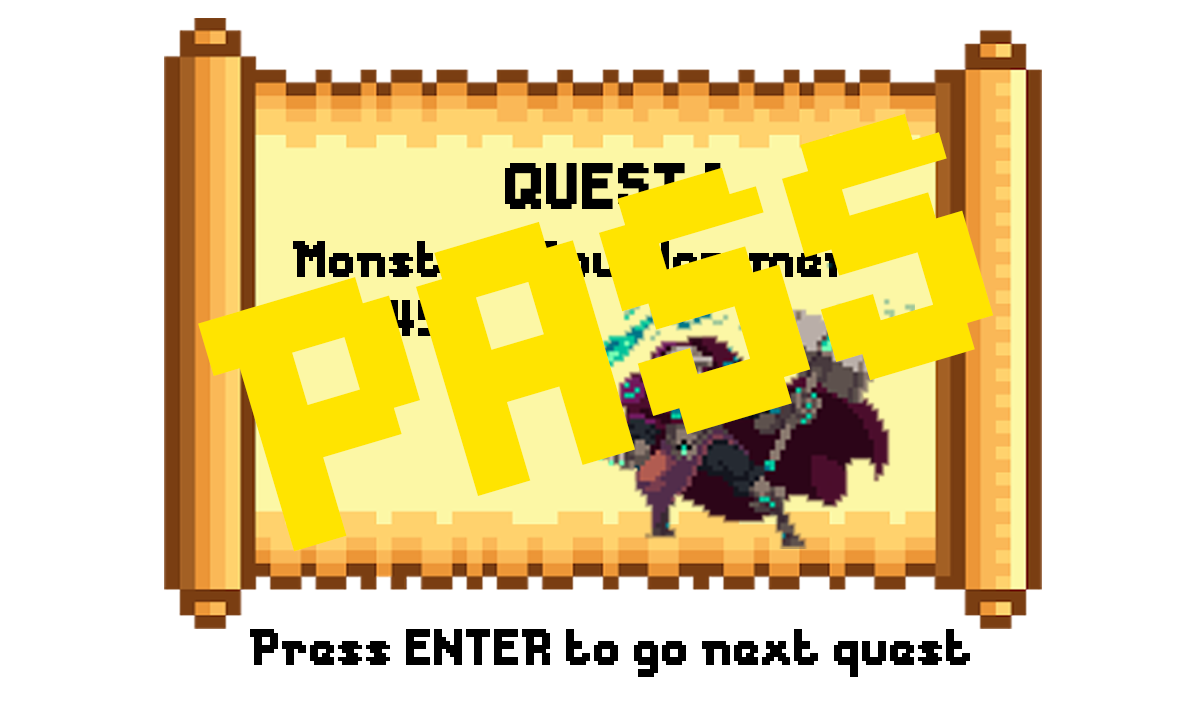
<style>
.page{position:relative;width:1200px;height:720px;background:#ffffff}
.page>*{position:absolute;margin:0}
.t1{font:327.3px "Messe-Duesseldorf";color:#ffe400}
.t2{font:61.3px "Messe-Duesseldorf";color:#000000}
.t3{font:48px "Messe-Duesseldorf"}
.t4{font:48px "Messe-Duesseldorf";color:#ffe400}
.t5{font:48px "Messe-Duesseldorf";color:#000000}
</style>
<div class="page">
<p class="t1" style="left:198px;top:113px;width:796px;height:439px;rotate:-17deg">PASS</p>
<p class="t2" style="left:505px;top:163px;width:216px;height:46px">QUEST 1</p>
<p class="t3" style="left:293px;top:241px;width:556px;height:36px">Monster : Soul Hammer</p>
<p class="t4" style="left:294px;top:300px;width:148px;height:36px">HP : 45</p>
<p class="t5" style="left:250px;top:629px;width:720px;height:48px">Press ENTER to go next quest</p>
</div>
